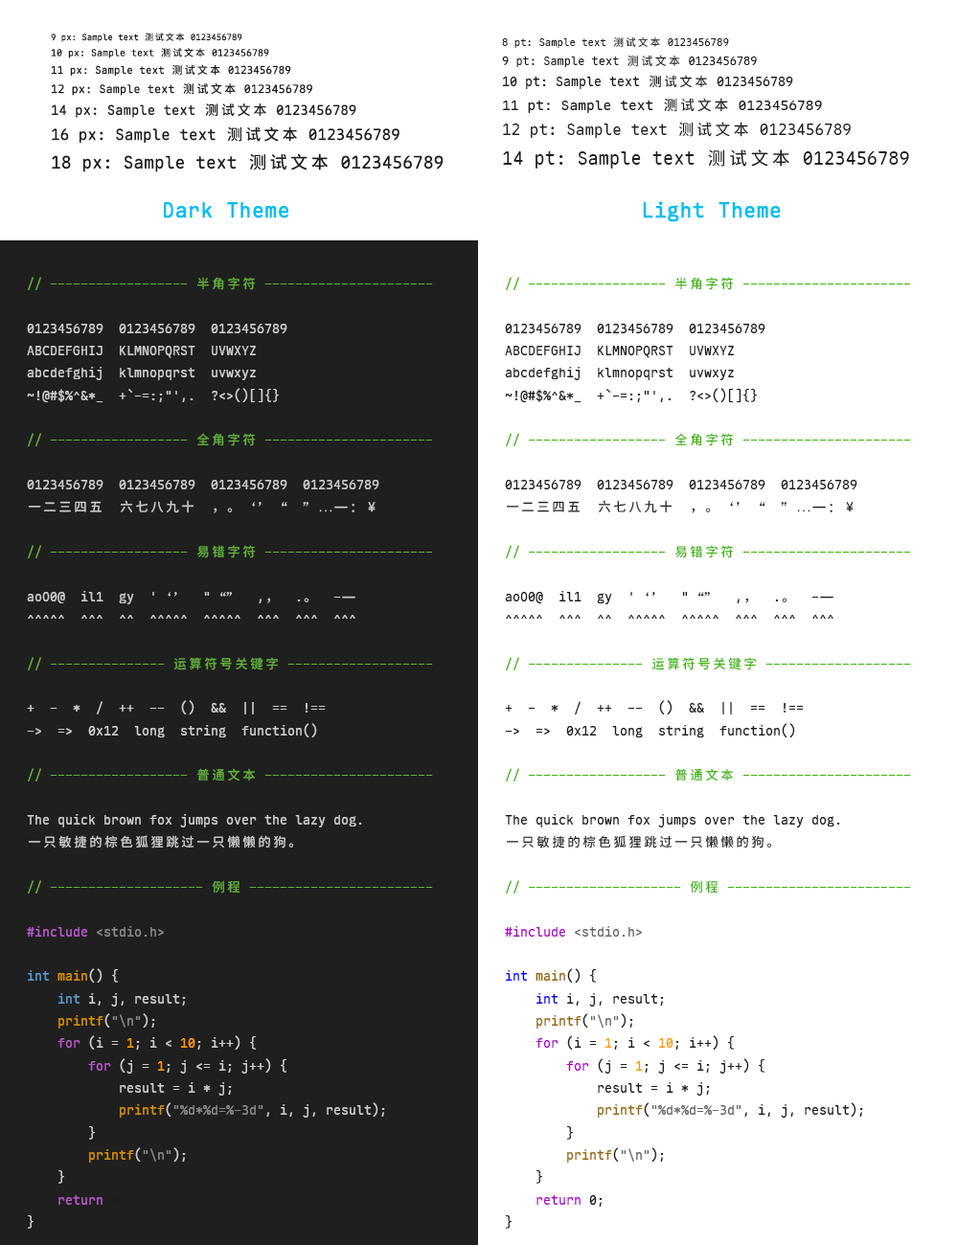
<style>
.page{position:relative;width:958px;height:1245px;background:#ffffff}
.page>*{position:absolute;margin:0}
.t1{font:9.6px "MapleMonoNL-NF-CN-Regular";color:#1d1d1d}
.t2{font:8.6px "MapleMonoNL-NF-CN-Regular";color:#1d1d1d}
.t3{font:10.5px "MapleMonoNL-NF-CN-Regular";color:#1d1d1d}
.t4{font:11.5px "MapleMonoNL-NF-CN-Regular";color:#1d1d1d}
.t5{font:13.4px "MapleMonoNL-NF-CN-Regular";color:#1d1d1d}
.t6{font:15.3px "MapleMonoNL-NF-CN-Regular";color:#1d1d1d}
.t7{font:17.2px "MapleMonoNL-NF-CN-Regular";color:#1d1d1d}
.t8{font:12.8px "MapleMonoNL-NF-CN-Regular";color:#1d1d1d}
.t9{font:10.2px "MapleMonoNL-NF-CN-Regular";color:#1d1d1d}
.t10{font:14px "MapleMonoNL-NF-CN-Regular";color:#1d1d1d}
.t11{font:17.9px "MapleMonoNL-NF-CN-Regular";color:#1d1d1d}
.t12{font:20.4px "MapleMonoNL-NF-CN-Regular";color:#00bfef;font-weight:bold}
.t13{font:12.8px "MapleMonoNL-NF-CN-Regular";color:#cccccc}
.t14{font:12.8px "MapleMonoNL-NF-CN-Regular";color:#62b03b}
.t15{font:12.8px "MapleMonoNL-NF-CN-Regular";color:#63b13c}
.t16{font:12.8px "MapleMonoNL-NF-CN-Regular";color:#b857cb}
.t17{font:12.8px "MapleMonoNL-NF-CN-Regular";color:#888888}
.t18{font:12.8px "MapleMonoNL-NF-CN-Regular";color:#5c98cb}
.t19{font:12.8px "MapleMonoNL-NF-CN-Regular";color:#d89000}
.t20{font:12.8px "MapleMonoNL-NF-CN-Regular";color:#5c99cc}
.t21{font:12.8px "MapleMonoNL-NF-CN-Regular";color:#ff9900}
.t22{font:12.8px "MapleMonoNL-NF-CN-Regular";color:#3cb300}
.t23{font:12.8px "MapleMonoNL-NF-CN-Regular";color:#aa00cc}
.t24{font:12.8px "MapleMonoNL-NF-CN-Regular";color:#666666}
.t25{font:12.8px "MapleMonoNL-NF-CN-Regular";color:#0000ff}
.t26{font:12.8px "MapleMonoNL-NF-CN-Regular";color:#996600}
</style>
<div class="page">
<p class="t1" style="left:51px;top:33px;width:392px;height:139px"><span class="t2">9 px: Sample text 测试文本 0123456789<br></span>10 px: Sample text 测试文本 0123456789<br><span class="t3">11 px: Sample text 测试文本 0123456789<br></span><span class="t4">12 px: Sample text 测试文本 0123456789<br></span><span class="t5">14 px: Sample text 测试文本 0123456789<br></span><span class="t6">16 px: Sample text 测试文本 0123456789<br></span><span class="t7">18 px: Sample text 测试文本 0123456789</span></p>
<p class="t8" style="left:502px;top:36px;width:407px;height:133px"><span class="t9">8 pt: Sample text 测试文本 0123456789<br></span><span class="t4">9 pt: Sample text 测试文本 0123456789<br></span>10 pt: Sample text 测试文本 0123456789<br><span class="t10">11 pt: Sample text 测试文本 0123456789<br></span><span class="t6">12 pt: Sample text 测试文本 0123456789<br></span><span class="t11">14 pt: Sample text 测试文本 0123456789</span></p>
<p class="t12" style="left:164px;top:202px;width:125px;height:16px">Dark Theme</p>
<p class="t12" style="left:643px;top:201px;width:138px;height:21px">Light Theme</p>
<p class="t13" style="left:27px;top:277px;width:406px;height:952px"><span class="t14">// ------------------ 半角字符 ----------------------<br><br></span>0123456789  0123456789  0123456789<br>ABCDEFGHIJ  KLMNOPQRST  UVWXYZ<br>abcdefghij  klmnopqrst  uvwxyz<br>~!@#$%^&amp;*_  +`-=:;"',.  ?&lt;&gt;()[]{}<br><br><span class="t15">// ------------------ 全角字符 ----------------------<br><br></span>0123456789  0123456789  0123456789  0123456789<br>一二三四五  六七八九十  ，。‘’“  ”…—：￥<br><br><span class="t15">// ------------------ 易错字符 ----------------------<br><br></span>aoO0@  il1  gy  '‘’  "“”  ,，  .。  -—<br>^^^^^  ^^^  ^^  ^^^^^  ^^^^^  ^^^  ^^^  ^^^<br><br><span class="t15">// --------------- 运算符号关键字 -------------------<br><br></span>+  -  *  /  ++  --  ()  &amp;&amp;  ||  ==  !==<br>-&gt;  =&gt;  0x12  long  string  function()<br><br><span class="t15">// ------------------ 普通文本 ----------------------<br><br></span>The quick brown fox jumps over the lazy dog.<br>一只敏捷的棕色狐狸跳过一只懒懒的狗。<br><br><span class="t15">// -------------------- 例程 ------------------------<br><br></span><span class="t16">#include </span><span class="t17">&lt;stdio.h&gt;<br> <br></span><span class="t18">int </span><span class="t19">main</span>() {<br>    <span class="t20">int </span>i, j, result;<br>    <span class="t19">printf</span>(<span class="t17">"\n"</span>);<br>    <span class="t16">for</span> (i = <span class="t21">1</span>; i &lt; <span class="t21">10</span>; i++) {<br>        <span class="t16">for</span> (j = <span class="t21">1</span>; j &lt;= i; j++) {<br>            result = i * j;<br>            <span class="t19">printf</span>(<span class="t17">"%d*%d=%-3d"</span>, i, j, result);<br>        }<br>        <span class="t19">printf</span>(<span class="t17">"\n"</span>);<br>    }<br>    <span class="t16">return </span><span class="t8">0;<br></span>}</p>
<p class="t8" style="left:505px;top:277px;width:406px;height:952px"><span class="t22">// ------------------ 半角字符 ----------------------<br></span><br>0123456789  0123456789  0123456789<br>ABCDEFGHIJ  KLMNOPQRST  UVWXYZ<br>abcdefghij  klmnopqrst  uvwxyz<br>~!@#$%^&amp;*_  +`-=:;"',.  ?&lt;&gt;()[]{}<br><br><span class="t22">// ------------------ 全角字符 ----------------------<br></span><br>0123456789  0123456789  0123456789  0123456789<br>一二三四五  六七八九十  ，。‘’“  ”…—：￥<br><br><span class="t22">// ------------------ 易错字符 ----------------------<br></span><br>aoO0@  il1  gy  '‘’  "“”  ,，  .。  -—<br>^^^^^  ^^^  ^^  ^^^^^  ^^^^^  ^^^  ^^^  ^^^<br><br><span class="t22">// --------------- 运算符号关键字 -------------------<br></span><br>+  -  *  /  ++  --  ()  &amp;&amp;  ||  ==  !==<br>-&gt;  =&gt;  0x12  long  string  function()<br><br><span class="t22">// ------------------ 普通文本 ----------------------<br></span><br>The quick brown fox jumps over the lazy dog.<br>一只敏捷的棕色狐狸跳过一只懒懒的狗。<br><br><span class="t22">// -------------------- 例程 ------------------------<br><br></span><span class="t23">#include </span><span class="t24">&lt;stdio.h&gt;<br> <br></span><span class="t25">int </span><span class="t26">main</span>() {<br>    <span class="t25">int </span>i, j, result;<br>    <span class="t26">printf</span>(<span class="t24">"\n"</span>);<br>    <span class="t23">for </span>(i = <span class="t21">1</span>; i &lt; <span class="t21">10</span>; i++) {<br>        <span class="t23">for </span>(j = <span class="t21">1</span>; j &lt;= i; j++) {<br>            result = i * j;<br>            <span class="t26">printf</span>(<span class="t24">"%d*%d=%-3d"</span>, i, j, result);<br>        }<br>        <span class="t26">printf</span>(<span class="t24">"\n"</span>);<br>    }<br>    <span class="t23">return </span>0;<br>}</p>
</div>
